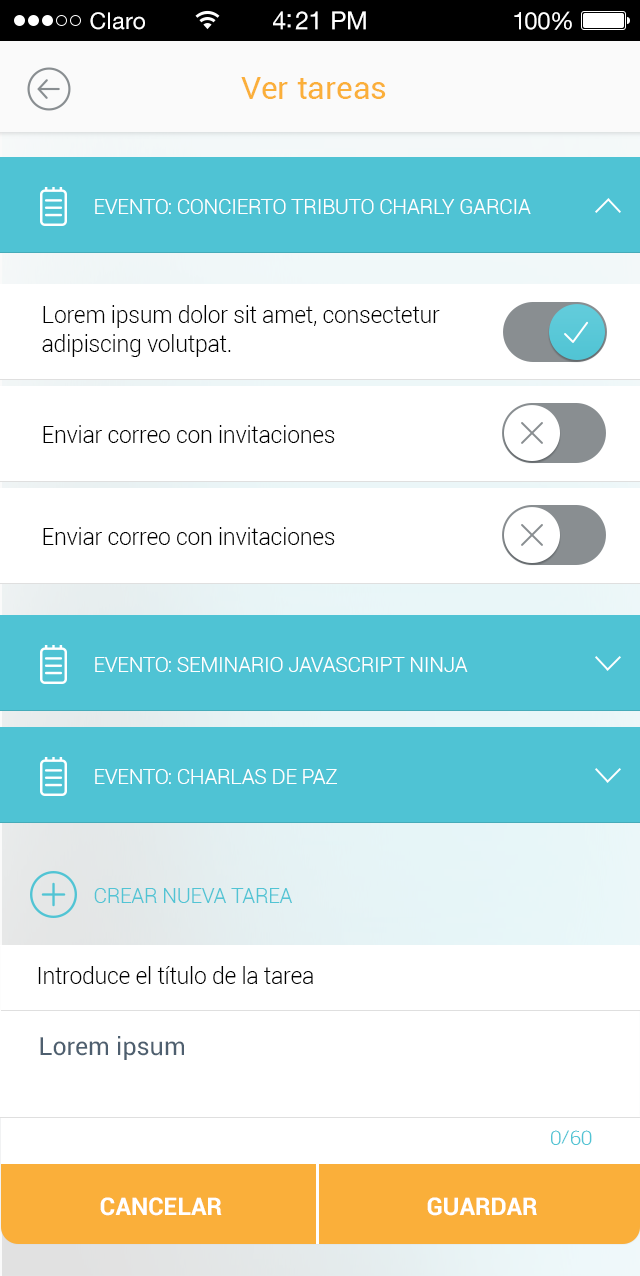
<style>
.page{position:relative;width:640px;height:1276px;background:#ffffff}
.page>*{position:absolute;margin:0}
.t1{font:23px "HelveticaNeueLTStd-Roman";letter-spacing:0.02em;color:#ffffff}
.t2{font:25px "HelveticaNeueLTStd-Roman";letter-spacing:-0.02em;color:#ffffff}
.t3{font:24px "HelveticaNeueLTStd-Roman";letter-spacing:-0.02em;color:#ffffff}
.t4{font:32px "Roboto-Regular";color:#faaf3a}
.t5{font:20.8px "Roboto-Light";letter-spacing:-0.01em;color:#ffffff}
.t6{font:22.9px/29.2px "Roboto-Light";letter-spacing:-0.01em;color:#000000}
.t7{font:22.9px "Roboto-Light";letter-spacing:-0.01em;color:#000000}
.t8{font:20.8px "Roboto-Light";letter-spacing:-0.01em;color:#51c4d4}
.t9{font:25px "Roboto-Regular";color:#4e5f6f}
.t10{font:20.4px "Roboto-Light";letter-spacing:-0.01em;color:#51c4d4}
.t11{font:24.1px "Roboto-Bold";color:#ffffff}
</style>
<div class="page">
<p class="t1" style="left:90px;top:12px;width:55px;height:18px">Claro</p>
<p class="t2" style="left:273px;top:11px;width:93px;height:19px">4:21 PM</p>
<p class="t3" style="left:514px;top:11px;width:58px;height:19px">100%</p>
<p class="t4" style="left:241px;top:77px;width:145px;height:22px">Ver tareas</p>
<p class="t5" style="left:95px;top:199px;width:436px;height:15px">EVENTO: CONCIERTO TRIBUTO CHARLY GARCIA</p>
<p class="t6" style="left:42px;top:305px;width:398px;height:52px">Lorem ipsum dolor sit amet, consectetur <br>adipiscing volutpat.</p>
<p class="t7" style="left:43px;top:425px;width:292px;height:18px">Enviar correo con invitaciones</p>
<p class="t7" style="left:43px;top:527px;width:292px;height:18px">Enviar correo con invitaciones</p>
<p class="t5" style="left:95px;top:657px;width:373px;height:15px">EVENTO: SEMINARIO JAVASCRIPT NINJA</p>
<p class="t5" style="left:95px;top:769px;width:242px;height:15px">EVENTO: CHARLAS DE PAZ</p>
<p class="t8" style="left:94px;top:888px;width:198px;height:15px">CREAR NUEVA TAREA</p>
<p class="t7" style="left:38px;top:966px;width:275px;height:18px">Introduce el título de la tarea</p>
<p class="t9" style="left:40px;top:1036px;width:144px;height:24px">Lorem ipsum</p>
<p class="t10" style="left:551px;top:1130px;width:41px;height:15px">0/60</p>
<p class="t11" style="left:100px;top:1197px;width:122px;height:19px">CANCELAR</p>
<p class="t11" style="left:427px;top:1197px;width:110px;height:19px">GUARDAR</p>
</div>
